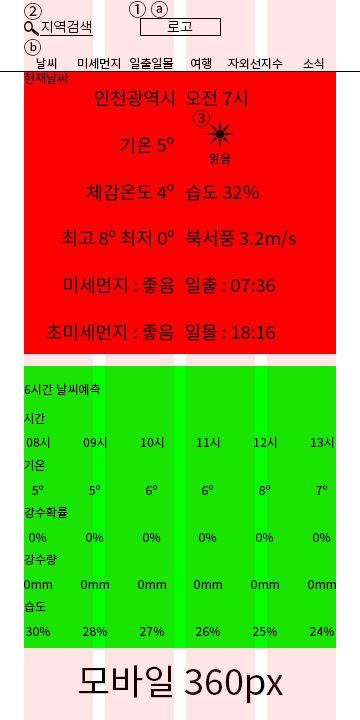
<style>
.page{position:relative;width:360px;height:720px;background:#ff0000}
.page>*{position:absolute;margin:0}
.t1{font:18px "NotoSansKR-Regular";color:#1a0000}
.t2{font:14px "NotoSansKR-Light";color:#1a0000}
.t3{font:14px "NotoSansKR-Light"}
.t4{font:12px "NotoSansKR-Regular";color:#1a0000}
.t5{font:12px "NotoSansKR-Regular"}
.t6{font:12px "NotoSansKR-Regular";color:#0d0000}
.t7{font:12px "NotoSansKR-Regular";color:#000000}
.t8{font:36px "NotoSansKR-Regular";color:#1a0000}
</style>
<div class="page">
<p class="t1" style="left:24px;top:3px;width:18px;height:17px">②</p>
<p class="t1" style="left:129px;top:1px;width:39px;height:17px">① ⓐ</p>
<p class="t2" style="left:41px;top:20px;width:50px;height:14px">지역검색</p>
<p class="t3" style="left:167px;top:21px;width:26px;height:11px">로고</p>
<p class="t1" style="left:24px;top:39px;width:17px;height:17px">ⓑ</p>
<p class="t4" style="left:36px;top:57px;width:21px;height:12px">날씨</p>
<p class="t5" style="left:78px;top:57px;width:42px;height:13px">미세먼지</p>
<p class="t4" style="left:130px;top:57px;width:44px;height:12px">일출일몰</p>
<p class="t4" style="left:191px;top:57px;width:21px;height:13px">여행</p>
<p class="t4" style="left:228px;top:57px;width:55px;height:13px">자외선지수</p>
<p class="t4" style="left:303px;top:58px;width:21px;height:11px">소식</p>
<p class="t4" style="left:24px;top:72px;width:43px;height:12px">현재날씨</p>
<p class="t1" style="left:95px;top:89px;width:79px;height:18px">인천광역시</p>
<p class="t1" style="left:185px;top:90px;width:62px;height:17px">오전 7시</p>
<p class="t1" style="left:193px;top:110px;width:17px;height:17px">③</p>
<p class="t1" style="left:120px;top:137px;width:54px;height:17px">기온 5º</p>
<p class="t4" style="left:210px;top:153px;width:21px;height:11px">맑음</p>
<p class="t1" style="left:87px;top:184px;width:87px;height:17px">체감온도 4º</p>
<p class="t1" style="left:186px;top:184px;width:73px;height:17px">습도 32%</p>
<p class="t1" style="left:62px;top:229px;width:112px;height:18px">최고 8º 최저 0º</p>
<p class="t1" style="left:186px;top:230px;width:110px;height:18px">북서풍 3.2m/s</p>
<p class="t1" style="left:64px;top:277px;width:111px;height:17px">미세먼지 : 좋음</p>
<p class="t1" style="left:186px;top:277px;width:89px;height:17px">일출 : 07:36</p>
<p class="t1" style="left:46px;top:324px;width:128px;height:17px">초미세먼지 : 좋음</p>
<p class="t1" style="left:186px;top:324px;width:89px;height:17px">일몰 : 18:16</p>
<p class="t4" style="left:24px;top:383px;width:77px;height:13px">6시간 날씨예측</p>
<p class="t4" style="left:24px;top:413px;width:21px;height:11px">시간</p>
<p class="t4" style="left:26px;top:437px;width:24px;height:11px">08시</p>
<p class="t4" style="left:83px;top:437px;width:24px;height:11px">09시</p>
<p class="t4" style="left:141px;top:437px;width:23px;height:11px">10시</p>
<p class="t4" style="left:197px;top:437px;width:23px;height:11px">11시</p>
<p class="t5" style="left:254px;top:437px;width:23px;height:11px">12시</p>
<p class="t4" style="left:311px;top:437px;width:23px;height:11px">13시</p>
<p class="t4" style="left:24px;top:459px;width:22px;height:12px">기온</p>
<p class="t4" style="left:32px;top:485px;width:12px;height:10px">5º</p>
<p class="t6" style="left:89px;top:485px;width:12px;height:10px">5º</p>
<p class="t4" style="left:146px;top:485px;width:12px;height:10px">6º</p>
<p class="t4" style="left:202px;top:485px;width:12px;height:10px">6º</p>
<p class="t7" style="left:259px;top:485px;width:12px;height:10px">8º</p>
<p class="t4" style="left:316px;top:485px;width:12px;height:10px">7º</p>
<p class="t4" style="left:24px;top:507px;width:44px;height:12px">강수확률</p>
<p class="t4" style="left:29px;top:533px;width:18px;height:9px">0%</p>
<p class="t5" style="left:86px;top:533px;width:18px;height:9px">0%</p>
<p class="t4" style="left:143px;top:533px;width:18px;height:9px">0%</p>
<p class="t4" style="left:199px;top:533px;width:18px;height:9px">0%</p>
<p class="t7" style="left:256px;top:533px;width:18px;height:9px">0%</p>
<p class="t4" style="left:313px;top:533px;width:18px;height:9px">0%</p>
<p class="t4" style="left:24px;top:554px;width:33px;height:11px">강수량</p>
<p class="t4" style="left:24px;top:580px;width:28px;height:9px">0mm</p>
<p class="t5" style="left:81px;top:580px;width:28px;height:9px">0mm</p>
<p class="t4" style="left:138px;top:580px;width:28px;height:9px">0mm</p>
<p class="t4" style="left:194px;top:580px;width:28px;height:9px">0mm</p>
<p class="t5" style="left:251px;top:580px;width:28px;height:9px">0mm</p>
<p class="t4" style="left:308px;top:580px;width:28px;height:9px">0mm</p>
<p class="t4" style="left:24px;top:601px;width:22px;height:11px">습도</p>
<p class="t4" style="left:26px;top:627px;width:24px;height:9px">30%</p>
<p class="t5" style="left:83px;top:627px;width:24px;height:9px">28%</p>
<p class="t4" style="left:140px;top:627px;width:24px;height:9px">27%</p>
<p class="t4" style="left:196px;top:627px;width:24px;height:9px">26%</p>
<p class="t5" style="left:253px;top:627px;width:24px;height:9px">25%</p>
<p class="t4" style="left:310px;top:627px;width:24px;height:9px">24%</p>
<p class="t8" style="left:78px;top:665px;width:205px;height:38px">모바일 360px</p>
</div>
